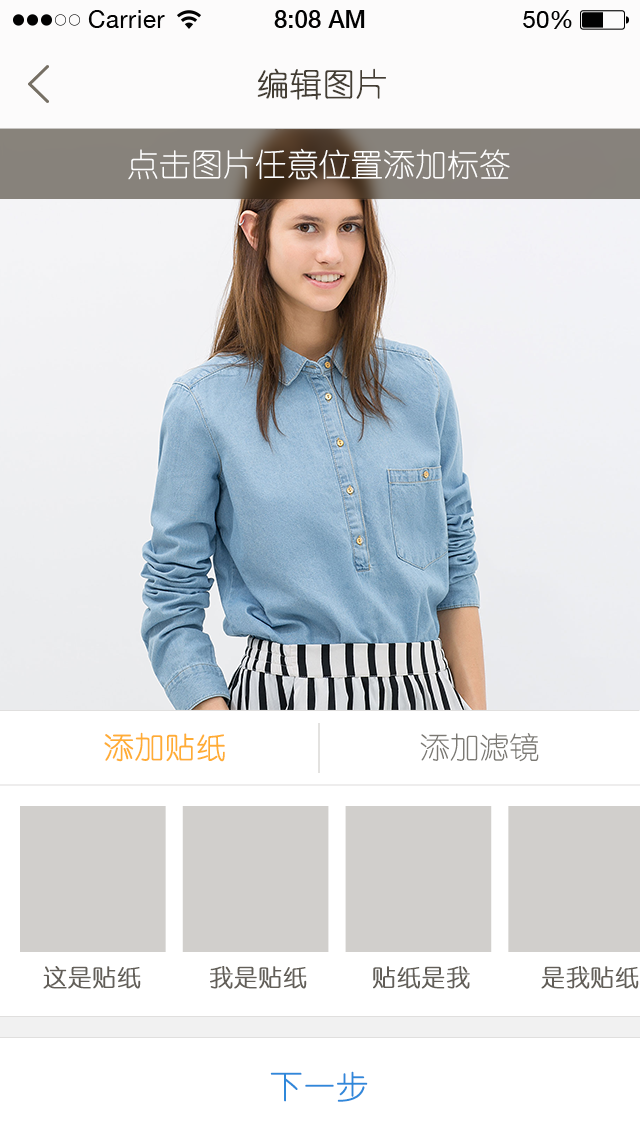
<style>
.page{position:relative;width:640px;height:1136px;background:#ffffff}
.page>*{position:absolute;margin:0}
.t1{font:32px "YouYuan";color:#433d33;text-transform:uppercase;font-weight:bold}
.t2{font:32px "YouYuan";color:#fefefe;text-transform:uppercase}
.t3{font:30px "YouYuan";color:#ffad34;text-transform:uppercase;font-weight:bold}
.t4{font:30px "YouYuan";color:#7b7973;text-transform:uppercase}
.t5{font:24px "YouYuan";color:#625e58;text-transform:uppercase;font-weight:bold}
.t6{font:32px "YouYuan";color:#2f88da;text-transform:uppercase;font-weight:bold}
</style>
<div class="page">
<p class="t1" style="left:257px;top:68px;width:129px;height:32px">编辑图片</p>
<p class="t2" style="left:128px;top:148px;width:382px;height:32px">点击图片任意位置添加标签</p>
<p class="t3" style="left:104px;top:732px;width:121px;height:30px">添加贴纸</p>
<p class="t4" style="left:420px;top:733px;width:119px;height:29px">添加滤镜</p>
<p class="t5" style="left:43px;top:966px;width:98px;height:23px">这是贴纸</p>
<p class="t5" style="left:210px;top:966px;width:97px;height:23px">我是贴纸</p>
<p class="t5" style="left:373px;top:966px;width:97px;height:23px">贴纸是我</p>
<p class="t5" style="left:541px;top:966px;width:98px;height:23px">是我贴纸</p>
<p class="t6" style="left:270px;top:1071px;width:98px;height:31px">下一步</p>
</div>
